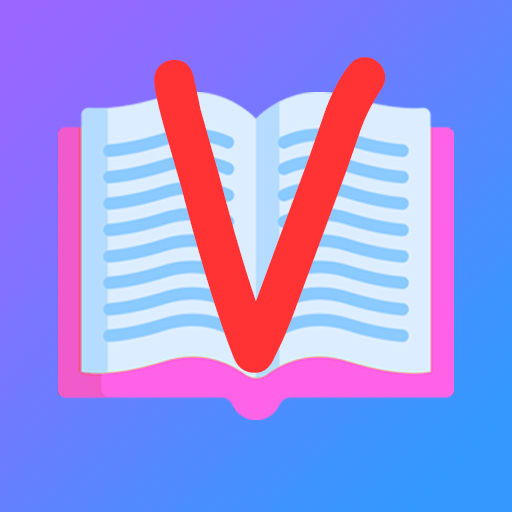
<style>
.page{position:relative;width:512px;height:512px}
.page>*{position:absolute;margin:0}
.t1{font:400px "ComicSansMS";color:#ff3333}
</style>
<div class="page">
<p class="t1" style="left:154px;top:57px;width:232px;height:316px">V</p>
</div>
